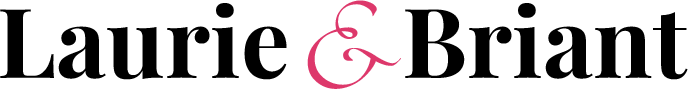
<style>
.page{position:relative;width:688px;height:89px;background:#ffffff}
.page>*{position:absolute;margin:0}
.t1{font:96.8px "PlayfairDisplay-Bold";color:#000000}
.t2{font:96.8px "Miama-Regular";color:#dd386b}
</style>
<div class="page">
<p class="t1" style="left:0px;top:3px;width:688px;height:77px">Laurie     Briant</p>
<p class="t2" style="left:307px;top:0px;width:94px;height:89px">&amp;</p>
</div>
